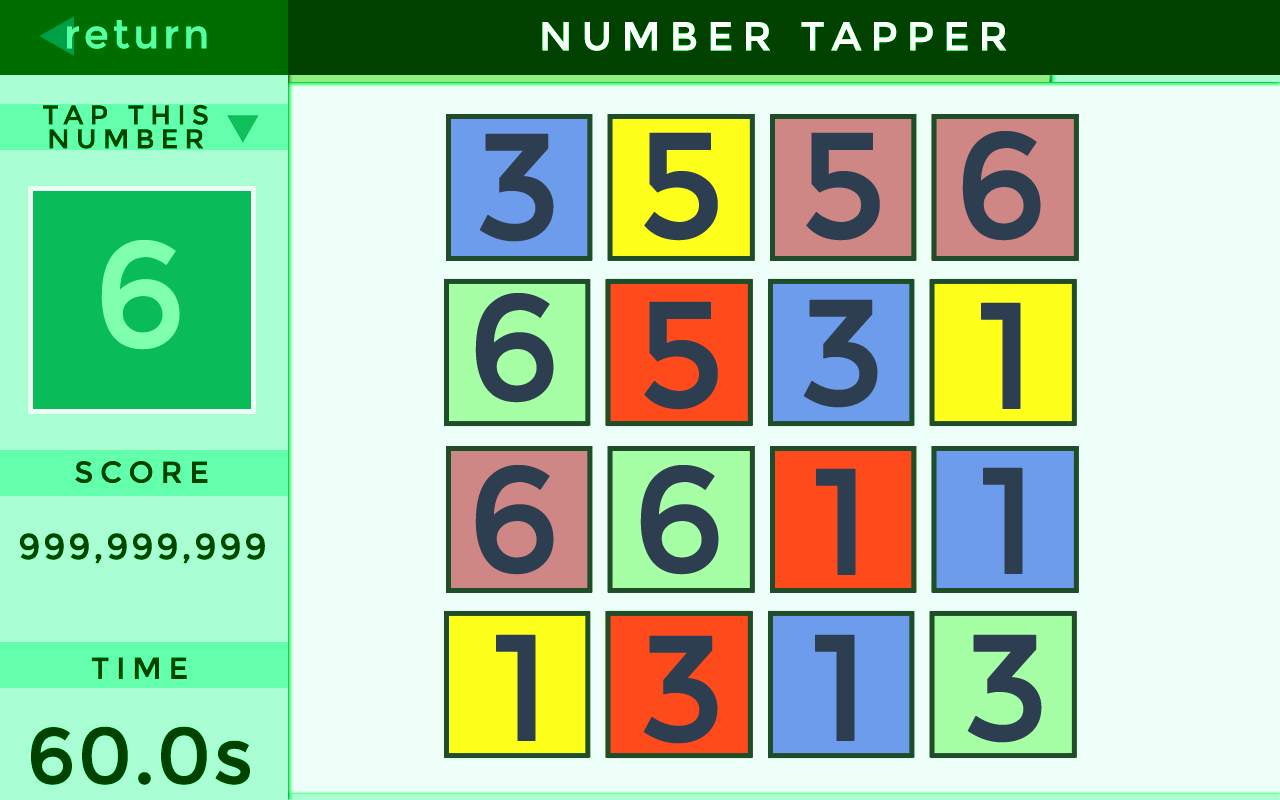
<style>
.page{position:relative;width:1280px;height:800px;background:#eefffa}
.page>*{position:absolute;margin:0}
.t1{font:40px "Montserrat-Regular";letter-spacing:0.075em;color:#56ffa1;font-weight:bold}
.t2{font:40px "Montserrat-Regular";letter-spacing:0.2em;color:#ffffff;text-transform:uppercase;font-weight:bold}
.t3{font:27px/23.9px "Montserrat-Regular";letter-spacing:0.2em;color:#004100;text-transform:uppercase;font-weight:bold}
.t4{font:150px "Montserrat-Regular";letter-spacing:0.2em;color:#2d3e50;text-transform:uppercase;font-weight:bold}
.t5{font:150px "Montserrat-Regular";letter-spacing:0.2em;color:#80ffac;text-transform:uppercase;font-weight:bold}
.t6{font:30px "Montserrat-Regular";letter-spacing:0.2em;color:#004100;font-weight:bold}
.t7{font:36px "Montserrat-Regular";letter-spacing:0.05em;color:#004100;font-weight:bold}
.t8{font:79px "Montserrat-Regular";color:#004100;text-transform:uppercase;font-weight:bold}
.t9{font:79px "Montserrat-Regular";color:#004100;font-weight:bold}
</style>
<div class="page">
<p class="t1" style="left:67px;top:20px;width:140px;height:29px">return</p>
<p class="t2" style="left:542px;top:22px;width:465px;height:29px">NUMBER TAPPER</p>
<p class="t3" style="left:43px;top:104px;width:165px;height:45px;text-align:center">Tap This <br>NUMBER</p>
<p class="t4" style="left:479px;top:133px;width:75px;height:109px">3</p>
<p class="t4" style="left:644px;top:132px;width:74px;height:109px">5</p>
<p class="t4" style="left:806px;top:132px;width:74px;height:109px">5</p>
<p class="t4" style="left:962px;top:131px;width:79px;height:110px">6</p>
<p class="t5" style="left:101px;top:240px;width:79px;height:110px">6</p>
<p class="t4" style="left:475px;top:293px;width:79px;height:110px">6</p>
<p class="t4" style="left:644px;top:301px;width:74px;height:109px">5</p>
<p class="t4" style="left:803px;top:299px;width:75px;height:109px">3</p>
<p class="t4" style="left:981px;top:302px;width:40px;height:107px">1</p>
<p class="t6" style="left:75px;top:461px;width:133px;height:23px">SCORE</p>
<p class="t4" style="left:475px;top:465px;width:79px;height:110px">6</p>
<p class="t4" style="left:640px;top:465px;width:79px;height:110px">6</p>
<p class="t4" style="left:816px;top:468px;width:40px;height:107px">1</p>
<p class="t4" style="left:983px;top:467px;width:40px;height:107px">1</p>
<p class="t7" style="left:19px;top:533px;width:246px;height:31px">999,999,999</p>
<p class="t4" style="left:496px;top:634px;width:40px;height:107px">1</p>
<p class="t4" style="left:643px;top:635px;width:75px;height:109px">3</p>
<p class="t4" style="left:815px;top:634px;width:40px;height:107px">1</p>
<p class="t4" style="left:967px;top:634px;width:75px;height:109px">3</p>
<p class="t6" style="left:91px;top:657px;width:96px;height:22px">TIME</p>
<p class="t8" style="left:31px;top:726px;width:219px;height:59px">60.0<span class="t9">s</span></p>
</div>
